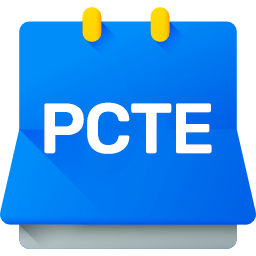
<style>
.page{position:relative;width:256px;height:256px;background:#ffffff}
.page>*{position:absolute;margin:0}
.t1{font:70px "Rubik-Medium";letter-spacing:-0.05em;color:#ffffff;font-weight:bold}
</style>
<div class="page">
<p class="t1" style="left:44px;top:102px;width:168px;height:52px">PCTE</p>
</div>
